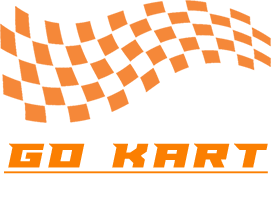
<style>
.page{position:relative;width:271px;height:200px;background:#ffffff}
.page>*{position:absolute;margin:0}
.t1{font:36px "PaladinsSemi-Italic";letter-spacing:0.1em;color:#fb7f01;text-transform:uppercase;font-weight:bold;text-decoration:underline}
</style>
<div class="page">
<p class="t1" style="left:4px;top:143px;width:264px;height:31px">go kart</p>
</div>
